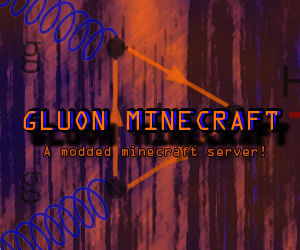
<style>
.page{position:relative;width:300px;height:250px}
.page>*{position:absolute;margin:0}
.t1{font:24px "OCRAStd";color:#ff7200}
.t2{font:24px "OCRAStd"}
.t3{font:12px "OCRAStd";color:#cf5314}
</style>
<div class="page">
<p class="t1" style="left:23px;top:111px;width:255px;height:19px">GLUON MINECRAFT</p>
<p class="t2" style="left:26px;top:111px;width:255px;height:19px">GLUON MINECRAFT</p>
<p class="t3" style="left:44px;top:146px;width:220px;height:10px">A modded minecraft server!</p>
</div>
